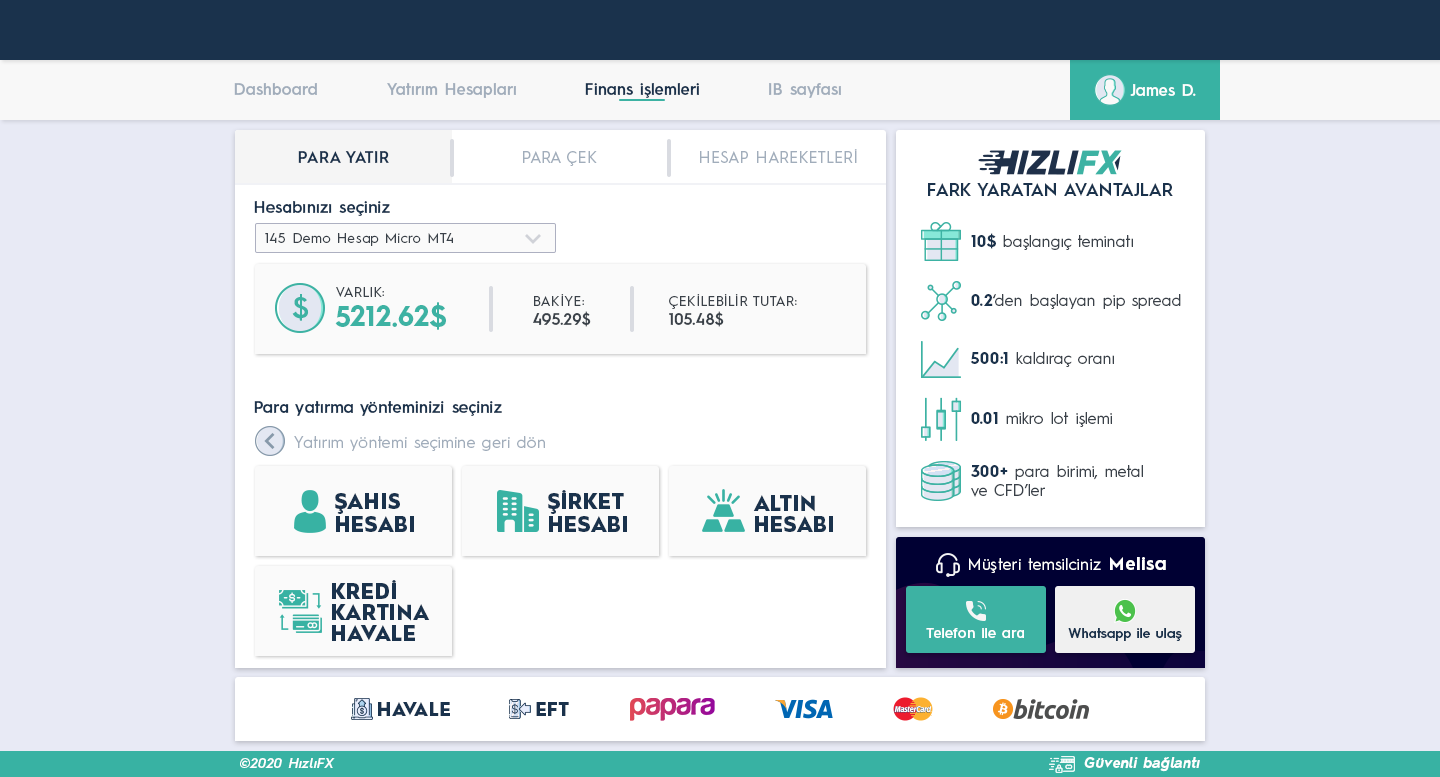
<style>
.page{position:relative;width:1440px;height:777px;background:#ffffff}
.page>*{position:absolute;margin:0}
.t1{font:16px "HurmeGeometricSans3-SemiBold";color:#a1adbb}
.t2{font:16px "HurmeGeometricSans3-SemiBold";color:#1a324c}
.t3{font:16px "HurmeGeometricSans3-SemiBold";color:#fefefe}
.t4{font:16px "HurmeGeometricSans1-Regular";letter-spacing:0.01em;color:#a1adbb}
.t5{font:16px "HurmeGeometricSans1-SemiBold";letter-spacing:0.01em;color:#1a324c}
.t6{font:18px "HurmeGeometricSans1-SemiBold";color:#1a324c}
.t7{font:16px "HurmeGeometricSans3-SemiBold";letter-spacing:0.01em;color:#1a324c}
.t8{font:14px "HurmeGeometricSans1-Regular";letter-spacing:0.025em;color:#3a4149}
.t9{font:16px "HurmeGeometricSans1-Regular";color:#3a4149}
.t10{font:16px "HurmeGeometricSans1-Bold";color:#1a324c}
.t11{font:29.2px "HurmeGeometricSans2-SemiBold";letter-spacing:0.01em;color:#3db2a3}
.t12{font:14px "HurmeGeometricSans1-Regular";letter-spacing:0.01em;color:#3a4149}
.t13{font:16px "HurmeGeometricSans1-SemiBold";letter-spacing:0.01em;color:#3a4149}
.t14{font:28px "HurmeGeometricSans1-Bold";letter-spacing:0.01em;color:#3db2a3}
.t15{font:21px/23px "HurmeGeometricSans1-Black";letter-spacing:0.025em;color:#1a324c}
.t16{font:21px/21px "HurmeGeometricSans1-Black";letter-spacing:0.025em;color:#1a324c}
.t17{font:16px "HurmeGeometricSans1-Regular";letter-spacing:0.025em;color:#ffffff}
.t18{font:18px "HurmeGeometricSans1-Bold";letter-spacing:0.05em;color:#ffffff}
.t19{font:14px "HurmeGeometricSans3-SemiBold";letter-spacing:0.01em;color:#ffffff}
.t20{font:13.5px "HurmeGeometricSans3-SemiBold";letter-spacing:0.01em;color:#1a324c}
.t21{font:18px "HurmeGeometricSans1-Black";letter-spacing:0.025em;color:#1a324c}
.t22{font:14px "HurmeGeometricSans2-SemiBoldObl";letter-spacing:0.025em;color:#ffffff}
.t23{font:14px "HurmeGeometricSans2-BoldObl";letter-spacing:0.025em;color:#ffffff}
</style>
<div class="page">
<p class="t1" style="left:234px;top:83px;width:83px;height:12px">Dashboard</p>
<p class="t1" style="left:387px;top:83px;width:129px;height:15px">Yatırım Hesapları</p>
<p class="t2" style="left:585px;top:83px;width:114px;height:15px">Finans işlemleri</p>
<p class="t1" style="left:769px;top:83px;width:72px;height:15px">IB sayfası</p>
<p class="t3" style="left:1130px;top:84px;width:66px;height:12px">James D.</p>
<p class="t4" style="left:700px;top:149px;width:157px;height:14px">HESAP HAREKETLERİ</p>
<p class="t5" style="left:298px;top:151px;width:91px;height:12px">PARA YATIR</p>
<p class="t4" style="left:523px;top:151px;width:74px;height:15px">PARA ÇEK</p>
<p class="t6" style="left:928px;top:183px;width:245px;height:13px">FARK YARATAN AVANTAJLAR</p>
<p class="t7" style="left:254px;top:201px;width:136px;height:15px">Hesabınızı seçiniz</p>
<p class="t8" style="left:265px;top:233px;width:188px;height:13px">145 Demo Hesap Micro MT4</p>
<p class="t9" style="left:971px;top:233px;width:162px;height:17px"><span class="t10">10$</span> başlangıç teminatı</p>
<p class="t11" style="left:292px;top:294px;width:17px;height:27px">$</p>
<p class="t12" style="left:336px;top:287px;width:48px;height:10px">VARLIK:</p>
<p class="t12" style="left:533px;top:294px;width:58px;height:33px">BAKİYE:<br><span class="t13">495.29$</span></p>
<p class="t12" style="left:669px;top:294px;width:128px;height:33px">ÇEKİLEBİLİR TUTAR:<br><span class="t13">105.48$</span></p>
<p class="t9" style="left:971px;top:294px;width:210px;height:15px"><span class="t10">0.2</span>‘den başlayan pip spread</p>
<p class="t14" style="left:335px;top:302px;width:111px;height:28px">5212.62$</p>
<p class="t9" style="left:970px;top:352px;width:144px;height:15px"><span class="t10">500:1</span> kaldıraç oranı</p>
<p class="t7" style="left:254px;top:401px;width:248px;height:15px">Para yatırma yönteminizi seçiniz</p>
<p class="t9" style="left:971px;top:412px;width:141px;height:15px"><span class="t10">0.01</span> mikro lot işlemi</p>
<p class="t4" style="left:294px;top:436px;width:251px;height:15px">Yatırım yöntemi seçimine geri dön</p>
<p class="t9" style="left:971px;top:465px;width:172px;height:32px"><span class="t10">300+</span> para birimi, metal<br>ve CFD’ler</p>
<p class="t15" style="left:335px;top:493px;width:79px;height:39px">ŞAHIS<br>HESABI</p>
<p class="t15" style="left:548px;top:490px;width:79px;height:42px">ŞİRKET<br>HESABI</p>
<p class="t16" style="left:753px;top:495px;width:80px;height:37px">ALTIN<br>HESABI</p>
<p class="t17" style="left:969px;top:557px;width:197px;height:16px">Müşteri temsilciniz <span class="t18">Melisa</span></p>
<p class="t16" style="left:332px;top:580px;width:98px;height:61px">KREDİ<br>KARTINA<br>HAVALE</p>
<p class="t19" style="left:926px;top:628px;width:98px;height:10px">Telefon ile ara</p>
<p class="t20" style="left:1068px;top:628px;width:114px;height:13px">Whatsapp ile ulaş</p>
<p class="t21" style="left:378px;top:702px;width:72px;height:14px">HAVALE</p>
<p class="t21" style="left:536px;top:702px;width:33px;height:14px">EFT</p>
<p class="t22" style="left:240px;top:758px;width:95px;height:10px">©2020 HızlıFX</p>
<p class="t23" style="left:1084px;top:757px;width:116px;height:15px">Güvenli bağlantı</p>
</div>
